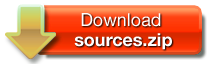
<style>
.page{position:relative;width:210px;height:64px;background:#ffffff}
.page>*{position:absolute;margin:0}
.t1{font:18px/18px "HelveticaNeue-Bold";color:#ffffff}
.t2{font:18px/18px "HelveticaNeue";color:#ffffff}
</style>
<div class="page">
<p class="t1" style="left:74px;top:13px;width:98px;height:37px;text-align:center"><span class="t2">Download <br></span>sources.zip</p>
</div>
